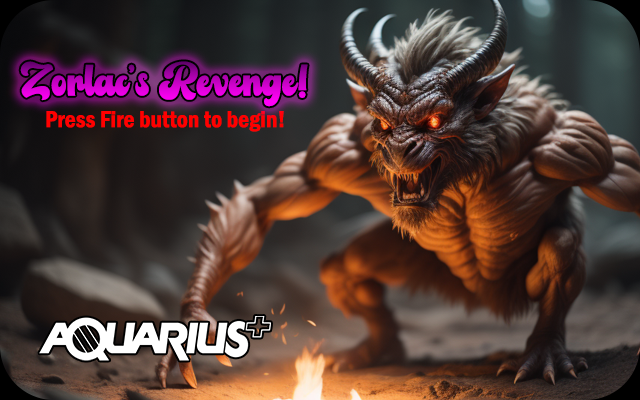
<style>
.page{position:relative;width:640px;height:400px}
.page>*{position:absolute;margin:0}
.t1{font:40px "Balbaleo"}
.t2{font:24px "FranklinGothic-DemiCond";color:#ff0000}
</style>
<div class="page">
<p class="t1" style="left:20px;top:61px;width:288px;height:46px">Zorlac’s Revenge!</p>
<p class="t2" style="left:46px;top:111px;width:238px;height:21px">Press Fire button to begin!</p>
</div>
